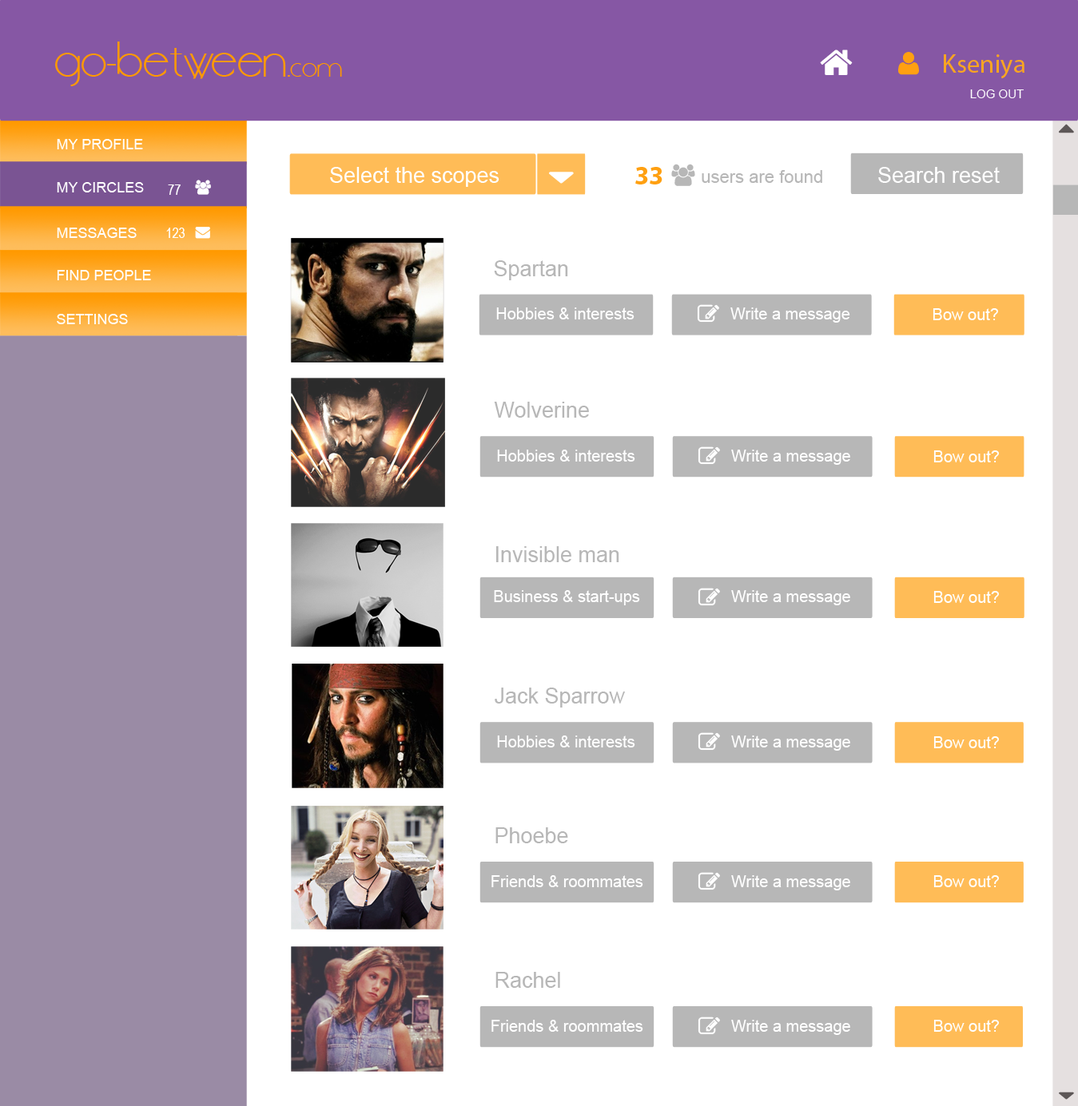
<style>
.page{position:relative;width:1078px;height:1106px;background:#ffffff}
.page>*{position:absolute;margin:0}
.t1{font:43.9px "DSStandartCyr";color:#ff9900}
.t2{font:25.6px "DSStandartCyr";color:#ff9900}
.t3{font:26.4px "MyriadPro-Regular";color:#faa521}
.t4{font:12px "ArialMT";color:#ffffff}
.t5{font:14.4px "ArialMT";color:#ffffff}
.t6{font:21.6px "ArialMT";color:#ffffff}
.t7{font:26.4px "MyriadPro-Bold";color:#ffa011}
.t8{font:17.6px "ArialMT";color:#b7b7b7}
.t9{font:14.4px "ArialNarrow";color:#ffffff}
.t10{font:21.6px "ArialMT";color:#b7b7b7}
.t11{font:16px "ArialMT";color:#ffffff}
</style>
<div class="page">
<p class="t1" style="left:55px;top:42px;width:287px;height:44px">go-between.<span class="t2">com</span></p>
<p class="t3" style="left:943px;top:54px;width:81px;height:25px">Kseniya</p>
<p class="t4" style="left:970px;top:89px;width:53px;height:9px">LOG OUT</p>
<p class="t5" style="left:57px;top:139px;width:86px;height:10px">MY PROFILE</p>
<p class="t6" style="left:330px;top:167px;width:169px;height:20px">Select the scopes</p>
<p class="t7" style="left:635px;top:167px;width:27px;height:18px">33</p>
<p class="t8" style="left:701px;top:170px;width:121px;height:13px">users are found</p>
<p class="t6" style="left:878px;top:167px;width:121px;height:16px">Search reset</p>
<p class="t5" style="left:57px;top:182px;width:87px;height:11px">MY CIRCLES</p>
<p class="t9" style="left:168px;top:185px;width:13px;height:10px">77</p>
<p class="t5" style="left:57px;top:228px;width:80px;height:10px">MESSAGES</p>
<p class="t9" style="left:166px;top:228px;width:19px;height:10px">123</p>
<p class="t10" style="left:494px;top:260px;width:74px;height:20px">Spartan</p>
<p class="t5" style="left:57px;top:270px;width:94px;height:10px">FIND PEOPLE</p>
<p class="t5" style="left:57px;top:314px;width:71px;height:10px">SETTINGS</p>
<p class="t11" style="left:496px;top:308px;width:138px;height:12px">Hobbies &amp; interests</p>
<p class="t11" style="left:730px;top:308px;width:120px;height:15px">Write a message</p>
<p class="t11" style="left:932px;top:308px;width:66px;height:12px">Bow out?</p>
<p class="t10" style="left:494px;top:402px;width:95px;height:16px">Wolverine</p>
<p class="t11" style="left:497px;top:450px;width:138px;height:12px">Hobbies &amp; interests</p>
<p class="t11" style="left:731px;top:450px;width:119px;height:15px">Write a message</p>
<p class="t11" style="left:933px;top:451px;width:66px;height:12px">Bow out?</p>
<p class="t10" style="left:496px;top:546px;width:123px;height:16px">Invisible man</p>
<p class="t11" style="left:494px;top:590px;width:146px;height:16px">Business &amp; start-ups</p>
<p class="t11" style="left:731px;top:590px;width:119px;height:16px">Write a message</p>
<p class="t11" style="left:933px;top:591px;width:66px;height:12px">Bow out?</p>
<p class="t10" style="left:495px;top:688px;width:130px;height:20px">Jack Sparrow</p>
<p class="t11" style="left:497px;top:736px;width:138px;height:12px">Hobbies &amp; interests</p>
<p class="t11" style="left:731px;top:736px;width:119px;height:15px">Write a message</p>
<p class="t11" style="left:933px;top:737px;width:66px;height:12px">Bow out?</p>
<p class="t10" style="left:495px;top:828px;width:73px;height:16px">Phoebe</p>
<p class="t11" style="left:491px;top:876px;width:152px;height:12px">Friends &amp; roommates</p>
<p class="t11" style="left:731px;top:876px;width:119px;height:15px">Write a message</p>
<p class="t11" style="left:933px;top:876px;width:66px;height:12px">Bow out?</p>
<p class="t10" style="left:495px;top:972px;width:65px;height:16px">Rachel</p>
<p class="t11" style="left:491px;top:1020px;width:152px;height:12px">Friends &amp; roommates</p>
<p class="t11" style="left:731px;top:1020px;width:119px;height:15px">Write a message</p>
<p class="t11" style="left:933px;top:1020px;width:66px;height:12px">Bow out?</p>
</div>
